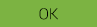
<style>
.page{position:relative;width:97px;height:27px;background:#7cb342}
.page>*{position:absolute;margin:0}
.t1{font:15px "Roboto-Thin";color:#000000;font-weight:bold}
</style>
<div class="page">
<p class="t1" style="left:39px;top:8px;width:19px;height:12px">OK</p>
</div>
